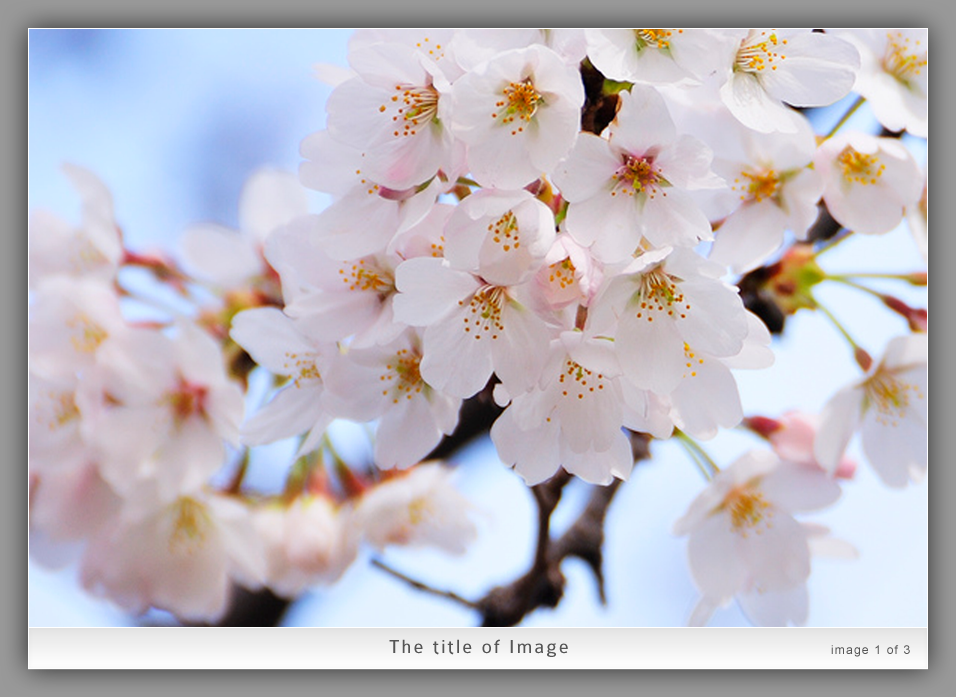
<style>
.page{position:relative;width:956px;height:697px}
.page>*{position:absolute;margin:0}
.t1{font:20px "Colaborate-Regular";letter-spacing:0.1em;color:#555555}
.t2{font:12px "ArialMT";letter-spacing:0.1em;color:#555555}
</style>
<div class="page">
<p class="t1" style="left:389px;top:639px;width:179px;height:18px">The title of Image</p>
<p class="t2" style="left:831px;top:645px;width:79px;height:12px">image 1 of 3</p>
</div>
